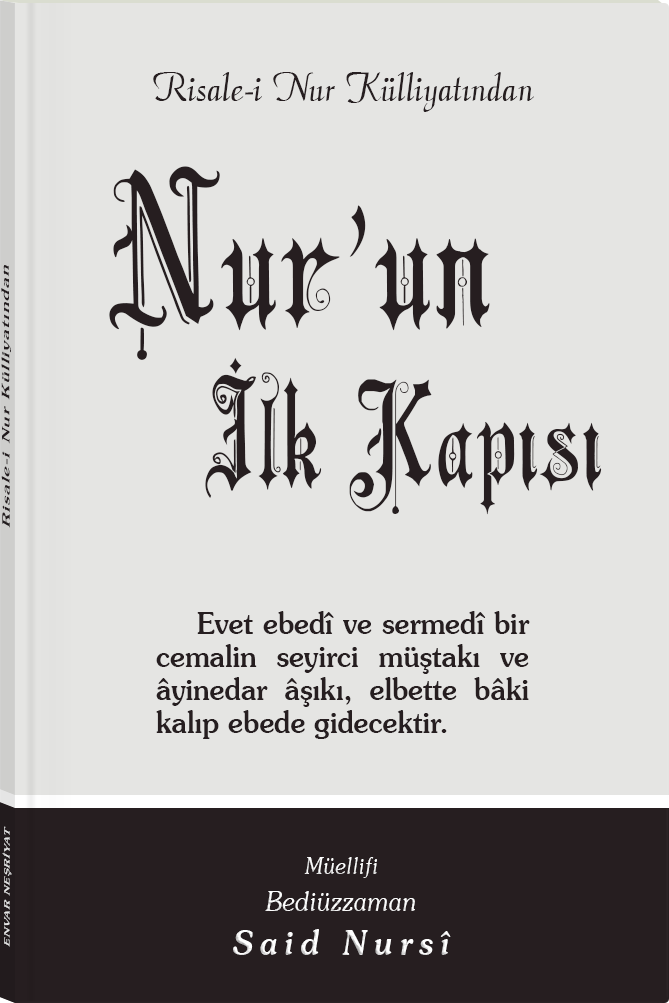
<style>
.page{position:relative;width:669px;height:1003px;background:#e5e5e3}
.page>*{position:absolute;margin:0}
.t1{font:45.3px "Barla © 072 Aria ScriptScriptSSi";color:#261e20;scale:0.94 1}
.t2{font:144.3px/162.5px "Barla © 001 Liva Nur";letter-spacing:-0.001em;color:#261e20;scale:0.92 1}
.t3{font:199.7px/178.2px "Barla © 001 Liva Nur";letter-spacing:-0.001em;color:#261e20;scale:0.92 1}
.t4{font:11.4px "Souvenir-Medium";letter-spacing:0.08em;color:#261e20;scale:1.65 1}
.t5{font:30.3px/33px "Souvenir-Medium";color:#261e20;scale:0.92 1}
.t6{font:8.3px "Souvenir-Medium";letter-spacing:0.08em;color:#e5e5e5;scale:1.43 1}
.t7{font:27.1px/37.8px "Souvenir-LightItalic";color:#ffffff;scale:0.92 1}
.t8{font:22.8px/39.8px "Souvenir-LightItalic";color:#ffffff;scale:0.92 1}
.t9{font:33.9px/43.8px "Souvenir-MediumItalic";letter-spacing:0.2em;color:#ffffff;scale:0.92 1}
</style>
<div class="page">
<p class="t1" style="left:153px;top:72px;width:381px;height:40px">Risale-i Nur Külliyatından</p>
<p class="t2" style="left:109px;top:166px;width:493px;height:349px;text-align:center"><span class="t3">Nur’un<br>      </span>İlk Kapısı</p>
<p class="t4" style="left:1px;top:265px;width:10px;height:263px;rotate:-90deg">Risale-i Nur Külliyatından</p>
<p class="t5" style="left:156px;top:611px;width:374px;height:128px;text-align:justify">Evet ebedî ve sermedî bir cemalin seyirci müştakı ve âyinedar âşıkı, elbette bâki kalıp ebede gidecektir.</p>
<p class="t6" style="left:2px;top:826px;width:10px;height:121px;rotate:-90deg">ENVAR NEŞRİYAT</p>
<p class="t7" style="left:233px;top:857px;width:218px;height:98px;text-align:center"><span class="t8">Müellifi<br></span>Bediüzzaman<br><span class="t9">Said Nursî</span></p>
</div>
